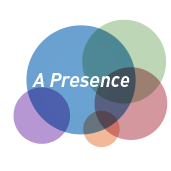
<style>
.page{position:relative;width:171px;height:171px;background:#ffffff}
.page>*{position:absolute;margin:0}
.t1{font:19.9px "DIN-BoldItalic";color:#ffffff}
</style>
<div class="page">
<p class="t1" style="left:32px;top:73px;width:98px;height:14px">A Presence</p>
</div>
